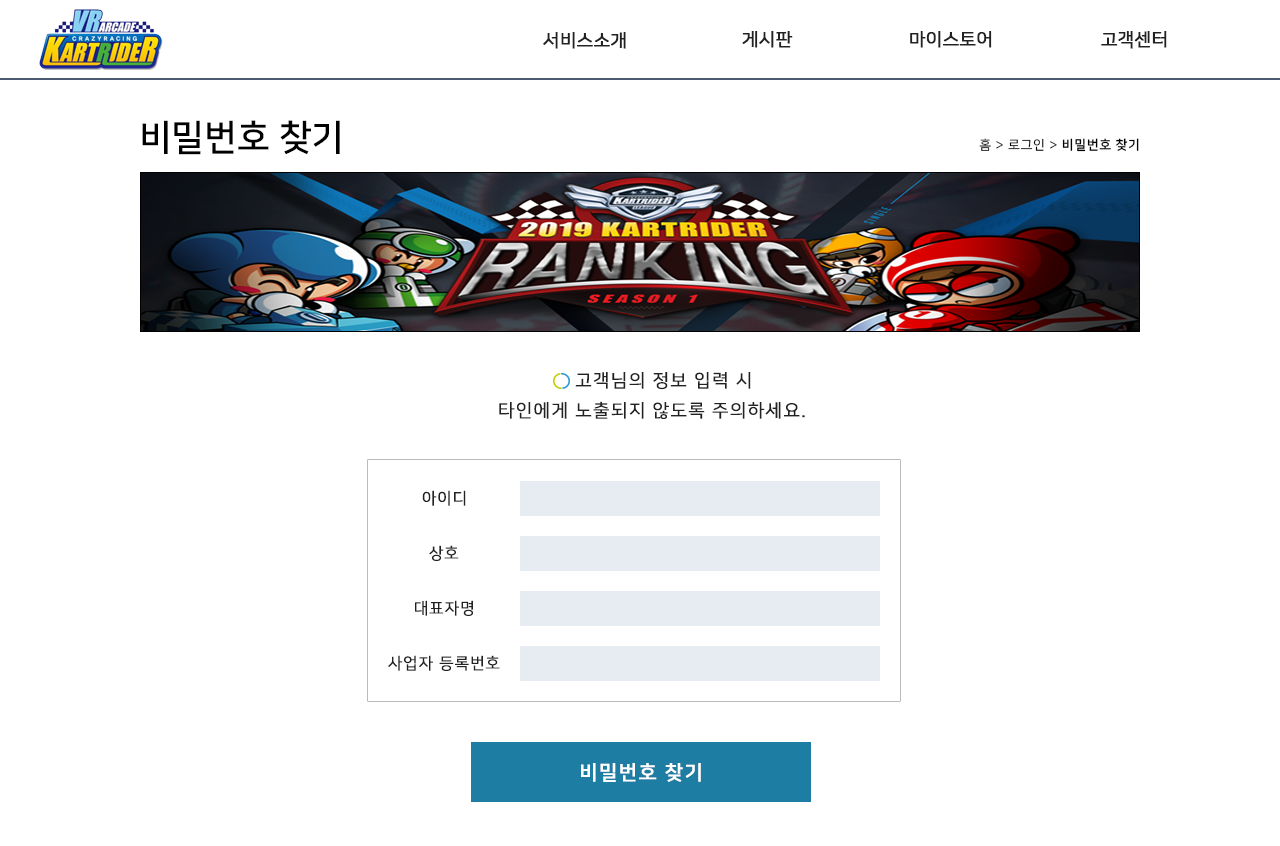
<style>
.page{position:relative;width:1280px;height:846px;background:#ffffff}
.page>*{position:absolute;margin:0}
.t1{font:18px "NanumSquareR";color:#222222;font-weight:bold}
.t2{font:36px "NanumSquareB";color:#000000}
.t3{font:13px "NanumSquareR";letter-spacing:0.05em;color:#000000}
.t4{font:13px "NanumSquareB";letter-spacing:0.05em;color:#000000}
.t5{font:18px/30px "NanumSquareR";letter-spacing:0.05em;color:#222222;text-transform:uppercase;font-weight:bold}
.t6{font:16px "NanumSquareR";letter-spacing:0.05em;color:#222222;text-transform:uppercase;font-weight:bold}
.t7{font:20px "NanumSquareB";letter-spacing:0.05em;color:#ffffff;text-transform:uppercase;font-weight:bold}
</style>
<div class="page">
<p class="t1" style="left:742px;top:30px;width:51px;height:18px">게시판</p>
<p class="t1" style="left:910px;top:30px;width:82px;height:18px">마이스토어</p>
<p class="t1" style="left:1101px;top:30px;width:66px;height:18px">고객센터</p>
<p class="t1" style="left:543px;top:31px;width:83px;height:18px">서비스소개</p>
<p class="t2" style="left:142px;top:120px;width:198px;height:35px">비밀번호 찾기</p>
<p class="t3" style="left:979px;top:138px;width:160px;height:14px">홈 &gt; 로그인 &gt; <span class="t4">비밀번호 찾기</span></p>
<p class="t5" style="left:499px;top:372px;width:306px;height:47px;text-align:center">고객님의 정보 입력 시<br>타인에게 노출되지 않도록 주의하세요.</p>
<p class="t6" style="left:422px;top:490px;width:44px;height:16px">아이디</p>
<p class="t6" style="left:429px;top:545px;width:30px;height:16px">상호</p>
<p class="t6" style="left:415px;top:600px;width:58px;height:16px">대표자명</p>
<p class="t6" style="left:388px;top:655px;width:112px;height:16px">사업자 등록번호</p>
<p class="t7" style="left:581px;top:763px;width:120px;height:19px">비밀번호 찾기</p>
</div>
